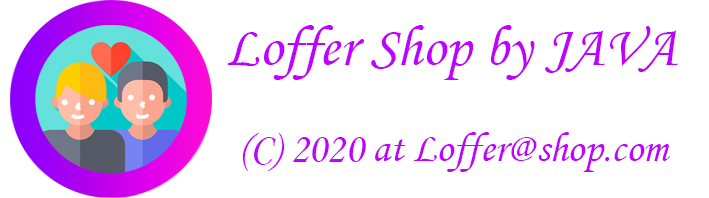
<style>
.page{position:relative;width:709px;height:198px;background:#ffffff}
.page>*{position:absolute;margin:0}
.t1{font:58.3px "MonotypeCorsiva";color:#c001ff}
.t2{font:41.7px "MonotypeCorsiva";color:#c001ff}
</style>
<div class="page">
<p class="t1" style="left:227px;top:25px;width:451px;height:55px">Loffer Shop by JAVA</p>
<p class="t2" style="left:242px;top:132px;width:428px;height:40px">(C) 2020 at Loffer@shop.com</p>
</div>
